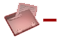
<style>
.page{position:relative;width:60px;height:39px;background:#ffffff}
.page>*{position:absolute;margin:0}
.t1{font:48px "CenturyGothic";color:#990000}
</style>
<div class="page">
<p class="t1" style="left:43px;top:18px;width:14px;height:4px">-</p>
</div>
